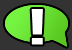
<style>
.page{position:relative;width:72px;height:50px;background:#333333}
.page>*{position:absolute;margin:0}
.t1{font:48px "Verdana-Bold";letter-spacing:0.1em;color:#ffffff;font-weight:bold}
</style>
<div class="page">
<p class="t1" style="left:31px;top:9px;width:12px;height:36px">!</p>
</div>
